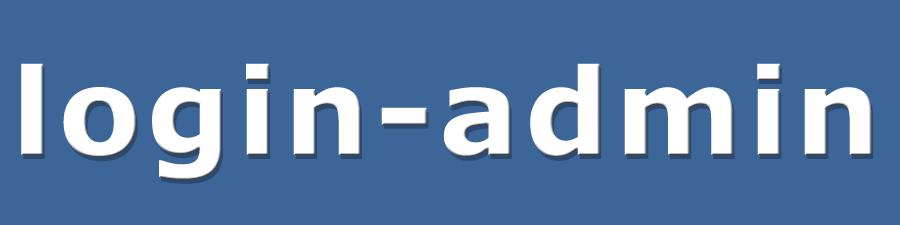
<style>
.page{position:relative;width:900px;height:225px;background:#3d6698}
.page>*{position:absolute;margin:0}
.t1{font:120px "Verdana-Bold";letter-spacing:0.05em;color:#ffffff}
</style>
<div class="page">
<p class="t1" style="left:21px;top:63px;width:851px;height:117px">login-admin</p>
</div>
